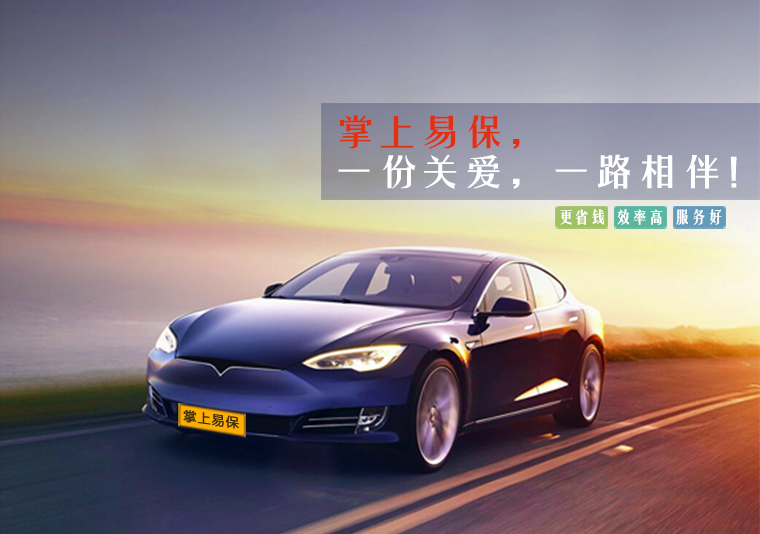
<style>
.page{position:relative;width:760px;height:534px}
.page>*{position:absolute;margin:0}
.t1{font:34.3px/39.9px "FZYTK--GBK1-0";letter-spacing:-0.1em;color:#ffffff;font-weight:bold;scale:1.37 1}
.t2{font:34.3px/39.9px "FZYTK--GBK1-0";letter-spacing:-0.1em;color:#e33013;font-weight:bold;scale:1.37 1}
.t3{font:15.5px "FZYTK--GBK1-0";letter-spacing:-0.05em;color:#ffffff;font-weight:bold;scale:1.08 1}
.t4{font:13.3px "FZLTHJW--GB1-0";letter-spacing:0.05em;color:#372c14;font-weight:bold}
</style>
<div class="page">
<p class="t1" style="left:338px;top:115px;width:399px;height:74px"><span class="t2">掌上易保，<br></span>一份关爱，一路相伴！</p>
<p class="t3" style="left:560px;top:209px;width:45px;height:16px">更省钱</p>
<p class="t3" style="left:617px;top:209px;width:46px;height:16px">效率高</p>
<p class="t3" style="left:676px;top:209px;width:46px;height:16px">服务好</p>
<p class="t4" style="left:183px;top:410px;width:56px;height:19px;rotate:7deg">掌上易保</p>
</div>
